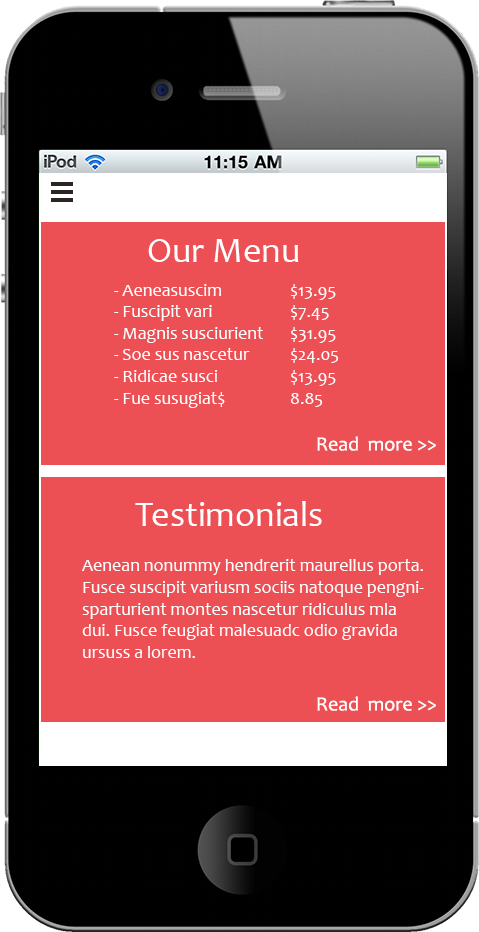
<style>
.page{position:relative;width:479px;height:932px;background:#ec5054}
.page>*{position:absolute;margin:0}
.t1{font:36px "Candara";color:#ffffff}
.t2{font:18px "Candara";color:#ffffff}
.t3{font:20px "Candara";color:#ffffff}
</style>
<div class="page">
<p class="t1" style="left:148px;top:239px;width:151px;height:23px">Our Menu</p>
<p class="t2" style="left:114px;top:284px;width:225px;height:124px">- Aeneasuscim  $13.95<br> - Fuscipit vari   $7.45<br> - Magnis susciurient $31.95<br> - Soe sus nascetur  $24.05<br> - Ridicae susci   $13.95<br> - Fue susugiat$  8.85</p>
<p class="t3" style="left:317px;top:436px;width:119px;height:15px">Read  more &gt;&gt;</p>
<p class="t1" style="left:135px;top:501px;width:187px;height:25px">Testimonials</p>
<p class="t2" style="left:82px;top:559px;width:342px;height:99px">Aenean nonummy hendrerit maurellus porta. Fusce suscipit variusm sociis natoque pengnisparturient montes nascetur ridiculus mla dui. Fusce feugiat malesuadc odio gravida ursuss a lorem.</p>
<p class="t3" style="left:317px;top:696px;width:119px;height:15px">Read  more &gt;&gt;</p>
</div>
